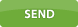
<style>
.page{position:relative;width:78px;height:27px;background:#6fac3a}
.page>*{position:absolute;margin:0}
.t1{font:12px "MyriadPro-Semibold";letter-spacing:0.04em;color:#ffffff}
</style>
<div class="page">
<p class="t1" style="left:24px;top:9px;width:31px;height:10px">SEND</p>
</div>
